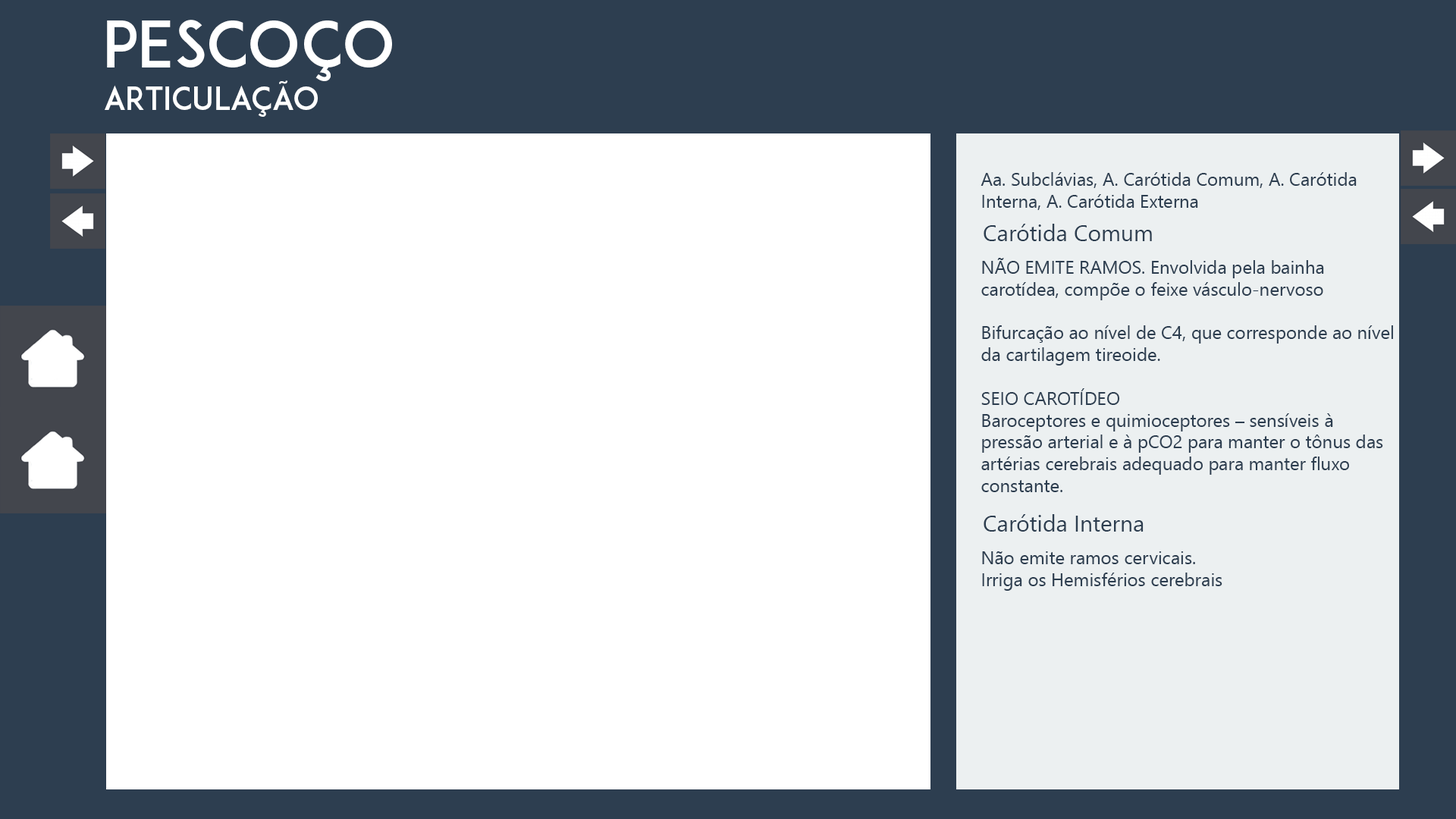
<style>
.page{position:relative;width:1456px;height:819px;background:#ffffff}
.page>*{position:absolute;margin:0}
.t1{font:63.2px "ADAM.CGPRO";color:#ffffff}
.t2{font:31.6px "ADAM.CGPRO";color:#ffffff}
.t3{font:18.2px "SegoeUI";color:#2d3e50}
.t4{font:22.7px "SegoeUI";color:#2d3e50}
</style>
<div class="page">
<p class="t1" style="left:107px;top:20px;width:285px;height:61px">Pescoço</p>
<p class="t2" style="left:105px;top:80px;width:213px;height:37px">articulação</p>
<p class="t3" style="left:981px;top:172px;width:376px;height:38px">Aa. Subclávias, A. Carótida Comum, A. Carótida <br>Interna, A. Carótida Externa</p>
<p class="t4" style="left:984px;top:224px;width:168px;height:17px">Carótida Comum</p>
<p class="t3" style="left:981px;top:258px;width:412px;height:234px">NÃO EMITE RAMOS. Envolvida pela bainha <br>carotídea, compõe o feixe vásculo-nervoso <br><br>Bifurcação ao nível de C4, que corresponde ao nível<br>da cartilagem tireoide.<br><br>SEIO CAROTÍDEO<br>Baroceptores e quimioceptores – sensíveis à <br>pressão arterial e à pCO2 para manter o tônus das <br>artérias cerebrais adequado para manter fluxo <br>constante.</p>
<p class="t4" style="left:984px;top:514px;width:160px;height:18px">Carótida Interna</p>
<p class="t3" style="left:982px;top:551px;width:240px;height:40px">Não emite ramos cervicais.<br>Irriga os Hemisférios cerebrais</p>
</div>
